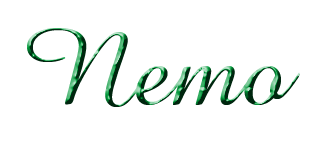
<style>
.page{position:relative;width:312px;height:156px;background:#ffffff}
.page>*{position:absolute;margin:0}
.t1{font:112px "Amaze-Normal"}
</style>
<div class="page">
<p class="t1" style="left:27px;top:28px;width:273px;height:79px">Nemo</p>
</div>
